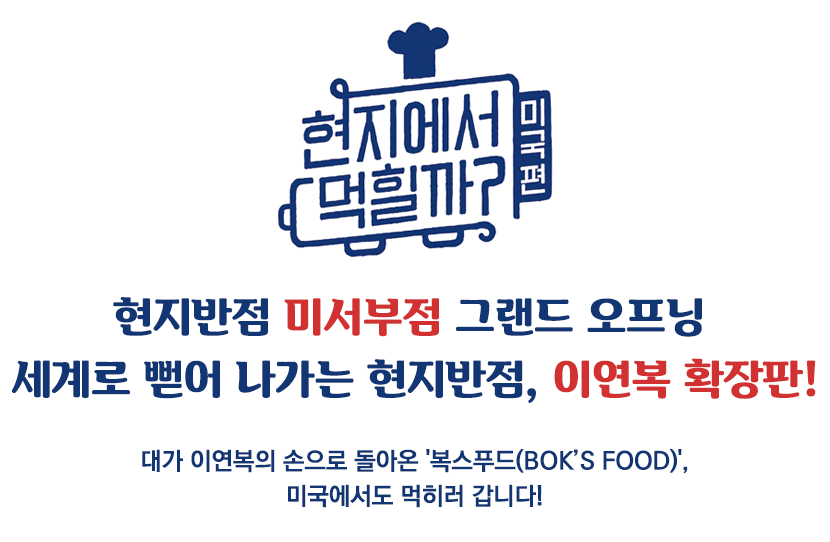
<style>
.page{position:relative;width:830px;height:542px;background:#ffffff}
.page>*{position:absolute;margin:0}
.t1{font:41.5px/62.2px "BinggraeII-Bold";letter-spacing:-0.01em;color:#123674}
.t2{font:41.5px/62.2px "BinggraeII-Bold";letter-spacing:-0.01em;color:#d13131}
.t3{font:24.5px/35px "KoPubDotumBold";letter-spacing:-0.01em;color:#123674}
</style>
<div class="page">
<p class="t1" style="left:12px;top:297px;width:804px;height:106px;text-align:center">현지반점 <span class="t2">미서부점</span> 그랜드 오프닝 <br>세계로 뻗어 나가는 현지반점, <span class="t2">이연복 확장판!</span></p>
<p class="t3" style="left:142px;top:449px;width:546px;height:59px;text-align:center">대가 이연복의 손으로 돌아온 '복스푸드(BOK’S FOOD)',<br>미국에서도 먹히러 갑니다!</p>
</div>
